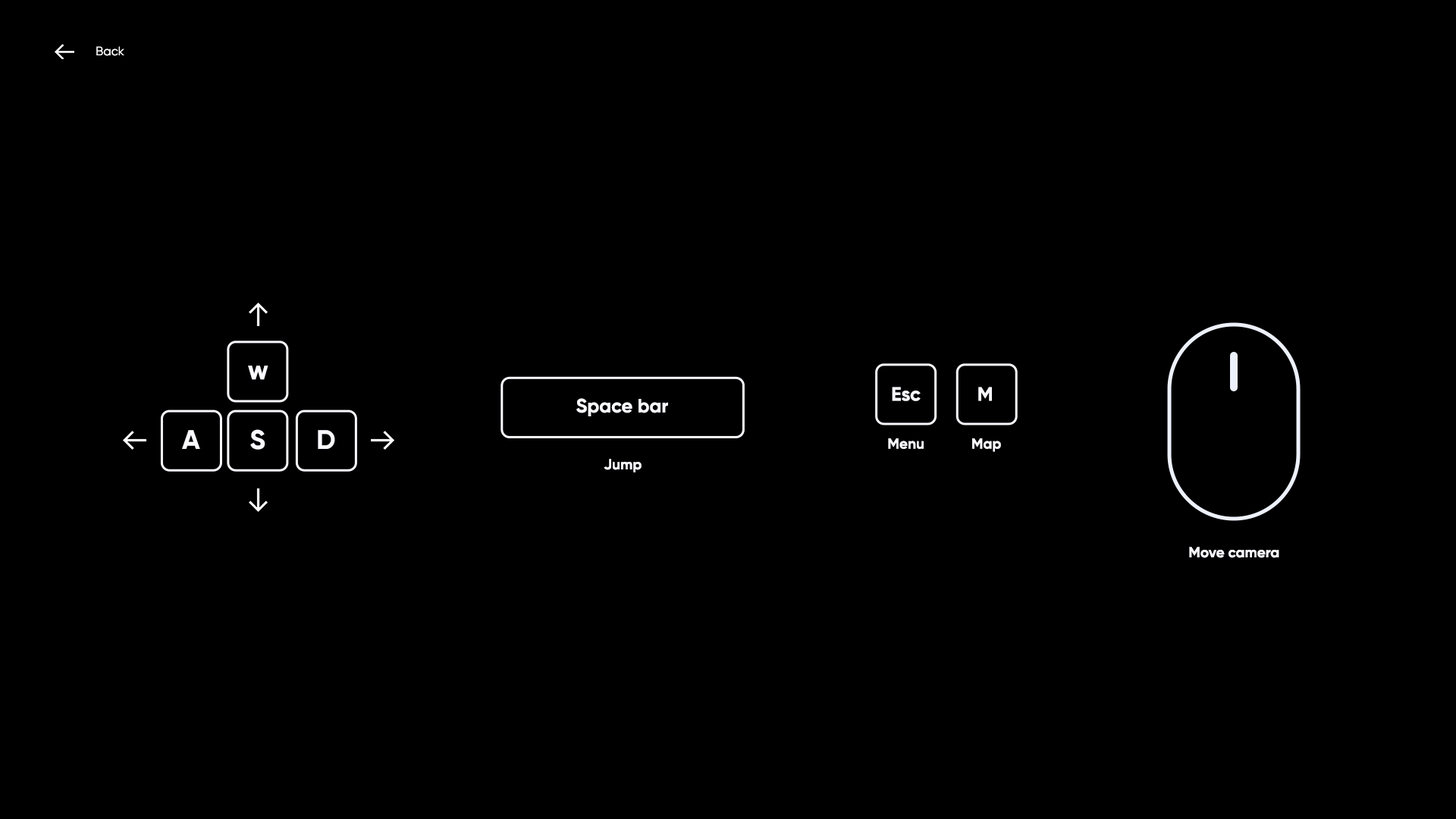
<style>
.page{position:relative;width:1456px;height:819px;background:#000000}
.page>*{position:absolute;margin:0}
.t1{font:12.4px "Gilroy-Regular";color:#ffffff}
.t2{font:26.6px "Gilroy-Bold";color:#faf9ff}
.t3{font:19.3px "Gilroy-Bold";color:#faf9ff}
.t4{font:14.5px "Gilroy-Bold";color:#faf9ff}
</style>
<div class="page">
<p class="t1" style="left:96px;top:46px;width:28px;height:10px">Back</p>
<p class="t2" style="left:248px;top:366px;width:20px;height:14px">w</p>
<p class="t3" style="left:892px;top:387px;width:29px;height:14px">Esc</p>
<p class="t3" style="left:978px;top:387px;width:14px;height:14px">M</p>
<p class="t3" style="left:576px;top:398px;width:92px;height:18px">Space bar</p>
<p class="t2" style="left:182px;top:430px;width:18px;height:19px">A</p>
<p class="t2" style="left:250px;top:429px;width:15px;height:21px">S</p>
<p class="t2" style="left:318px;top:430px;width:17px;height:19px">D</p>
<p class="t4" style="left:888px;top:438px;width:36px;height:11px">Menu</p>
<p class="t4" style="left:972px;top:438px;width:29px;height:14px">Map</p>
<p class="t4" style="left:604px;top:459px;width:38px;height:13px">Jump</p>
<p class="t4" style="left:1189px;top:547px;width:90px;height:11px">Move camera</p>
</div>
